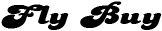
<style>
.page{position:relative;width:162px;height:31px;background:#ffffff}
.page>*{position:absolute;margin:0}
.t1{font:28.9px "Candice";color:#000000;scale:1.47 1}
</style>
<div class="page">
<p class="t1" style="left:1px;top:1px;width:161px;height:29px">Fly Buy</p>
</div>
